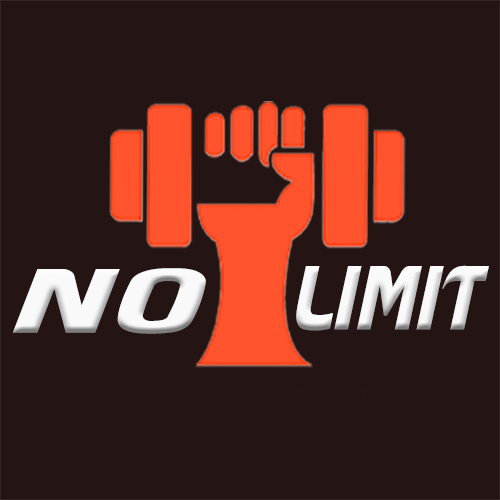
<style>
.page{position:relative;width:500px;height:500px;background:#241514}
.page>*{position:absolute;margin:0}
.t1{font:85.4px "Masque";letter-spacing:0.02em;color:#f9f9f9;scale:1.29 1}
.t2{font:85.4px "Masque";letter-spacing:0.02em;color:#f9f9f9;scale:0.71 1}
</style>
<div class="page">
<p class="t1" style="left:13px;top:268px;width:193px;height:66px">NO</p>
<p class="t2" style="left:296px;top:265px;width:193px;height:66px">LIMIT</p>
</div>
